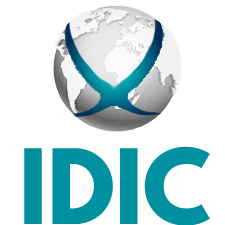
<style>
.page{position:relative;width:225px;height:225px;background:#ffffff}
.page>*{position:absolute;margin:0}
.t1{font:100.9px "SpartanMB-ExtraBold";color:#00909f}
</style>
<div class="page">
<p class="t1" style="left:24px;top:146px;width:186px;height:80px">IDIC</p>
</div>
